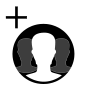
<style>
.page{position:relative;width:88px;height:88px;background:#ffffff}
.page>*{position:absolute;margin:0}
.t1{font:41px "MyriadHebrew-Regular";color:#000000}
</style>
<div class="page">
<p class="t1" style="left:5px;top:6px;width:22px;height:23px">+</p>
</div>
